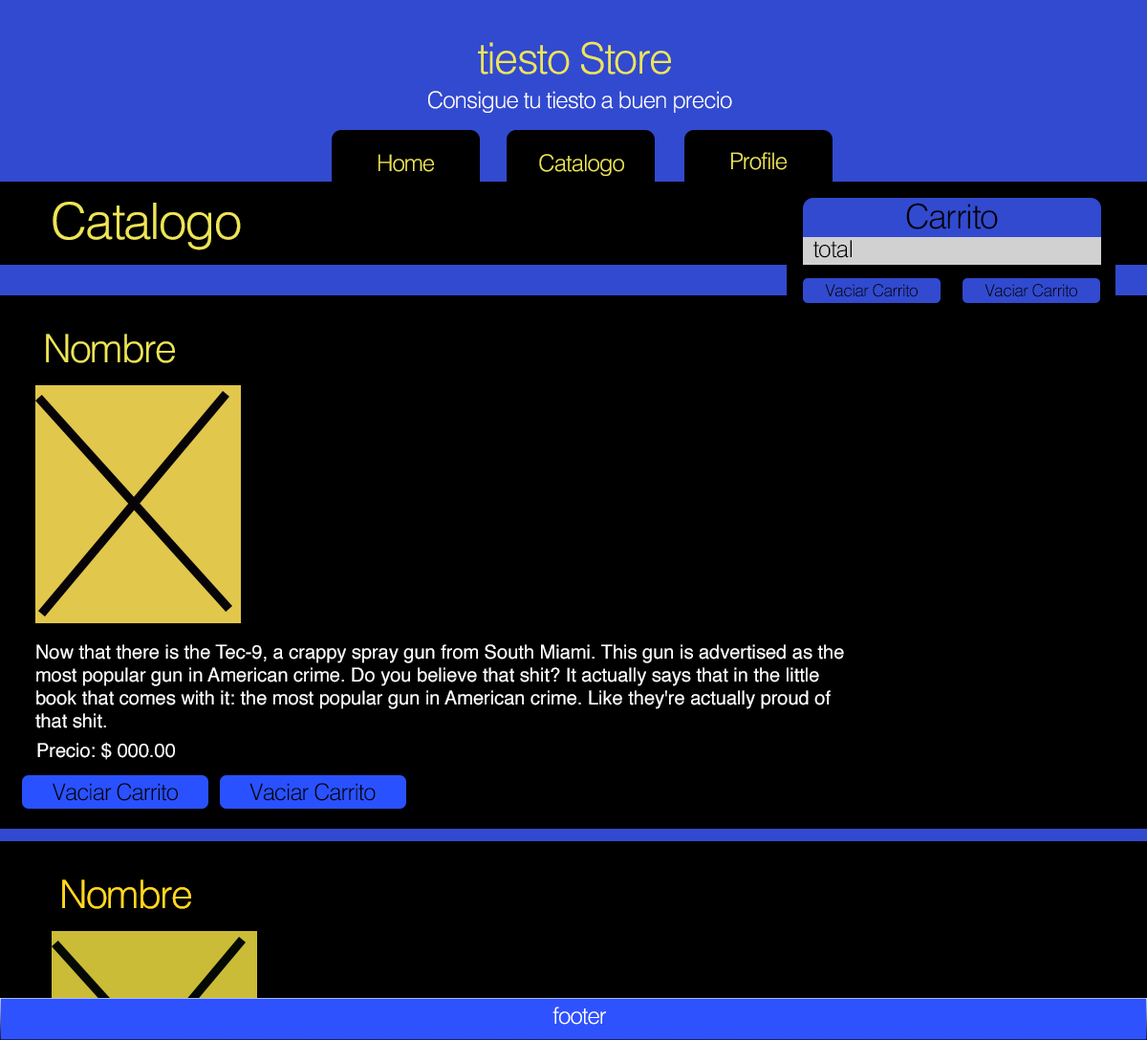
<style>
.page{position:relative;width:1147px;height:1040px;background:#000000}
.page>*{position:absolute;margin:0}
.t1{font:43px "Helvetica-Light";letter-spacing:-0.04em;color:#eee555}
.t2{font:22.9px "Helvetica-Light";letter-spacing:-0.04em;color:#ffffff}
.t3{font:22.9px "Helvetica-Light";letter-spacing:-0.04em;color:#eee555}
.t4{font:50.5px "Helvetica-Light";letter-spacing:-0.04em;color:#eee555}
.t5{font:34px "Helvetica-Light";letter-spacing:-0.04em;color:#000000}
.t6{font:23.4px "Helvetica-Light";letter-spacing:-0.04em;color:#000000}
.t7{font:16.7px "Helvetica-Light";letter-spacing:-0.04em;color:#000000}
.t8{font:39.1px "Helvetica-Light";letter-spacing:-0.04em;color:#eee555}
.t9{font:19.1px "Helvetica";color:#ffffff}
.t10{font:22.8px "Helvetica-Light";letter-spacing:-0.04em;color:#000000}
.t11{font:39.1px "Helvetica-Light";letter-spacing:-0.04em;color:#ffd72a}
</style>
<div class="page">
<p class="t1" style="left:478px;top:41px;width:193px;height:34px">tiesto Store</p>
<p class="t2" style="left:428px;top:91px;width:304px;height:22px">Consigue tu tiesto a buen precio</p>
<p class="t3" style="left:378px;top:154px;width:56px;height:18px">Home</p>
<p class="t3" style="left:539px;top:154px;width:85px;height:22px">Catalogo</p>
<p class="t3" style="left:731px;top:152px;width:56px;height:18px">Profile</p>
<p class="t4" style="left:53px;top:202px;width:188px;height:48px">Catalogo</p>
<p class="t5" style="left:906px;top:203px;width:92px;height:26px">Carrito</p>
<p class="t6" style="left:813px;top:240px;width:39px;height:18px">total</p>
<p class="t7" style="left:825px;top:284px;width:92px;height:13px">Vaciar Carrito</p>
<p class="t7" style="left:984px;top:284px;width:93px;height:13px">Vaciar Carrito</p>
<p class="t8" style="left:46px;top:334px;width:129px;height:29px">Nombre</p>
<p class="t9" style="left:35px;top:644px;width:809px;height:84px">Now that there is the Tec-9, a crappy spray gun from South Miami. This gun is advertised as the most popular gun in American crime. Do you believe that shit? It actually says that in the little book that comes with it: the most popular gun in American crime. Like they're actually proud of that shit.</p>
<p class="t9" style="left:37px;top:742px;width:138px;height:18px">Precio: $ 000.00</p>
<p class="t10" style="left:53px;top:783px;width:125px;height:18px">Vaciar Carrito</p>
<p class="t10" style="left:249px;top:783px;width:127px;height:18px">Vaciar Carrito</p>
<p class="t11" style="left:62px;top:879px;width:129px;height:30px">Nombre</p>
<p class="t2" style="left:552px;top:1006px;width:54px;height:18px">footer</p>
</div>
